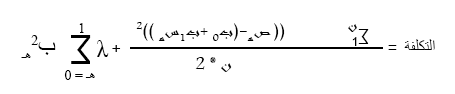
<style>
.page{position:relative;width:455px;height:94px;background:#ffffff}
.page>*{position:absolute;margin:0}
.t1{font:24px "TimesNewRomanPSMT";color:#000000}
.t2{font:18.7px "Andalus";color:#000000}
.t3{font:16px "Andalus";color:#000000}
.t4{font:12px "ArialMT";color:#000000;scale:0.96 1}
.t5{font:32.1px "ArialMT";color:#000000;scale:0.96 1}
.t6{font:12px "ArialMT";color:#000000}
</style>
<div class="page">
<p class="t1" style="left:79px;top:23px;width:5px;height:10px">1</p>
<p class="t2" style="left:136px;top:22px;width:149px;height:19px">2(( صه-(ب0 +ب1سه ))</p>
<p class="t3" style="left:348px;top:24px;width:9px;height:8px">ن</p>
<p class="t4" style="left:358px;top:29px;width:11px;height:15px;rotate:180deg">∑</p>
<p class="t1" style="left:21px;top:35px;width:35px;height:23px">ب2هـ</p>
<p class="t5" style="left:71px;top:35px;width:20px;height:29px;rotate:180deg">∑</p>
<p class="t1" style="left:97px;top:40px;width:12px;height:17px">λ</p>
<p class="t6" style="left:352px;top:37px;width:5px;height:9px">1</p>
<p class="t6" style="left:404px;top:39px;width:31px;height:11px">التكلفة</p>
<p class="t6" style="left:112px;top:45px;width:9px;height:7px">+</p>
<p class="t6" style="left:388px;top:45px;width:9px;height:5px">=</p>
<p class="t2" style="left:195px;top:57px;width:37px;height:15px">2 * ن</p>
<p class="t1" style="left:64px;top:70px;width:31px;height:10px">هـ = 0</p>
</div>
